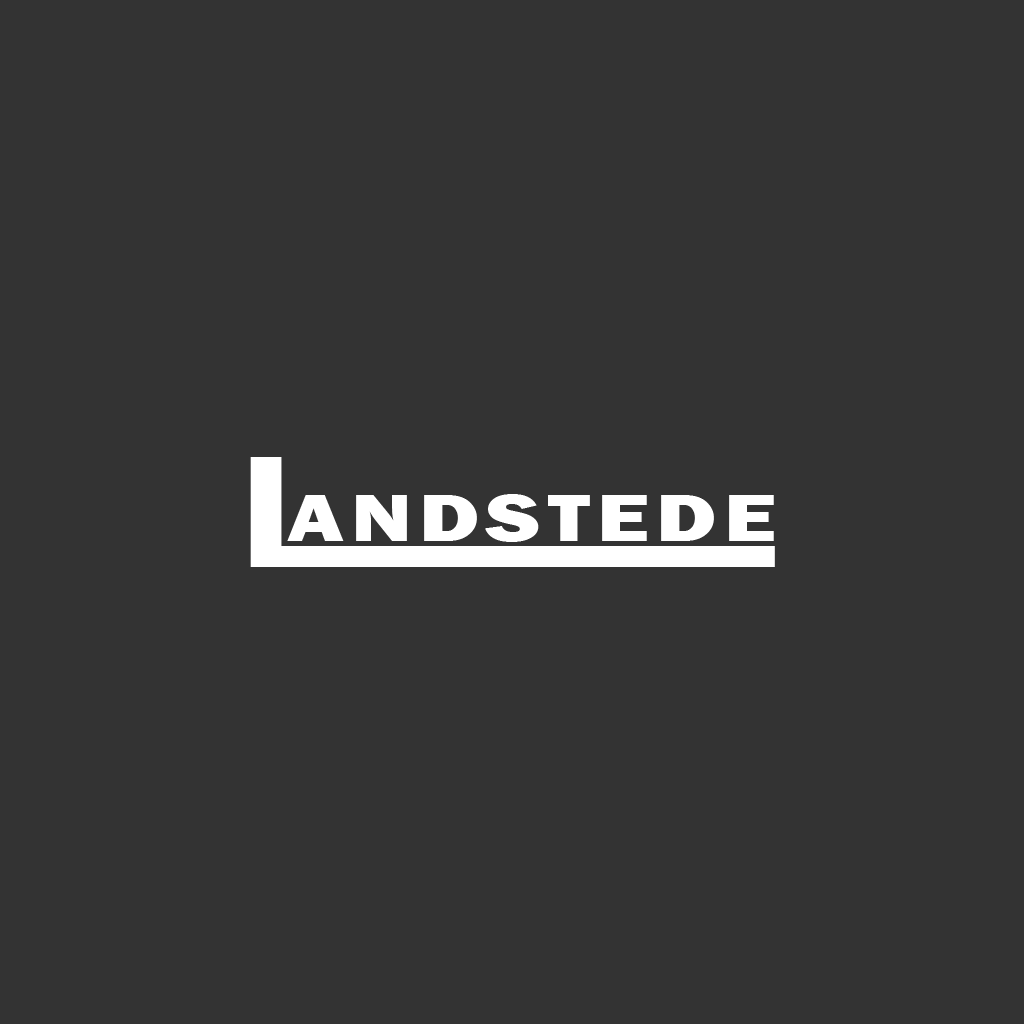
<style>
.page{position:relative;width:1024px;height:1024px;background:#333333}
.page>*{position:absolute;margin:0}
.t1{font:69px "FranklinGothic-Heavy";letter-spacing:0.08em;color:#ffffff;text-transform:uppercase;scale:1.29 1}
</style>
<div class="page">
<p class="t1" style="left:287px;top:494px;width:487px;height:48px">andstede</p>
</div>
